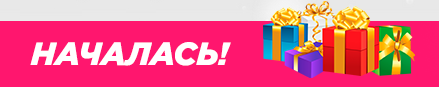
<style>
.page{position:relative;width:439px;height:87px;background:#ff166e}
.page>*{position:absolute;margin:0}
.t1{font:32px "GothamPro-BlackItalic";color:#ffffff}
</style>
<div class="page">
<p class="t1" style="left:30px;top:42px;width:201px;height:24px">НАЧАЛАСЬ!</p>
</div>
